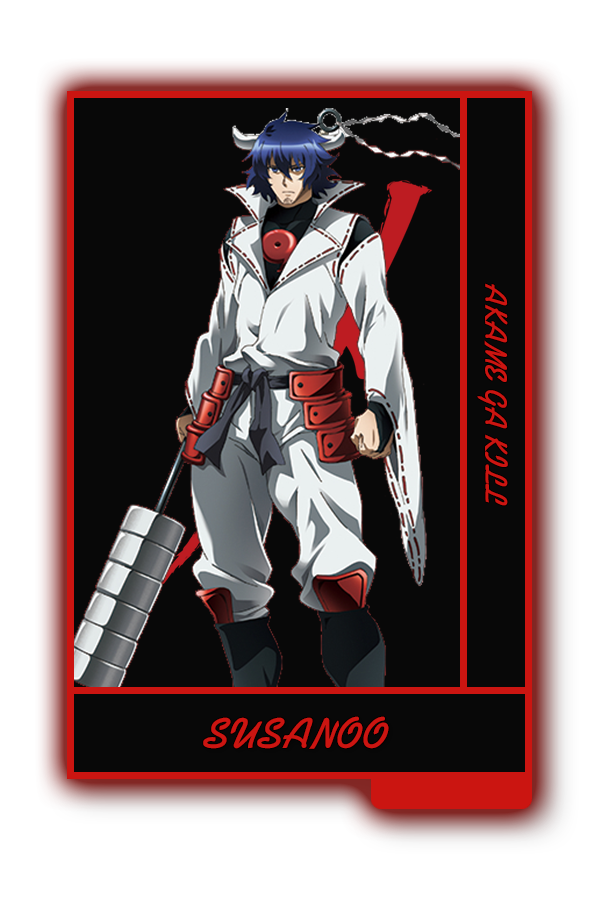
<style>
.page{position:relative;width:600px;height:900px;background:#080808}
.page>*{position:absolute;margin:0}
.t1{font:31.2px "Alako-Bold";color:#cb1511}
.t2{font:43.2px "Alako-Bold";color:#cb1511}
</style>
<div class="page">
<p class="t1" style="left:477px;top:283px;width:31px;height:223px;rotate:90deg">AKAME GA KILL</p>
<p class="t2" style="left:203px;top:716px;width:186px;height:33px">SUSANOO</p>
</div>
